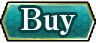
<style>
.page{position:relative;width:96px;height:43px}
.page>*{position:absolute;margin:0}
.t1{font:30px "RyuminPro-ExBold";color:#fffffa}
</style>
<div class="page">
<p class="t1" style="left:21px;top:8px;width:54px;height:27px">Buy</p>
</div>
